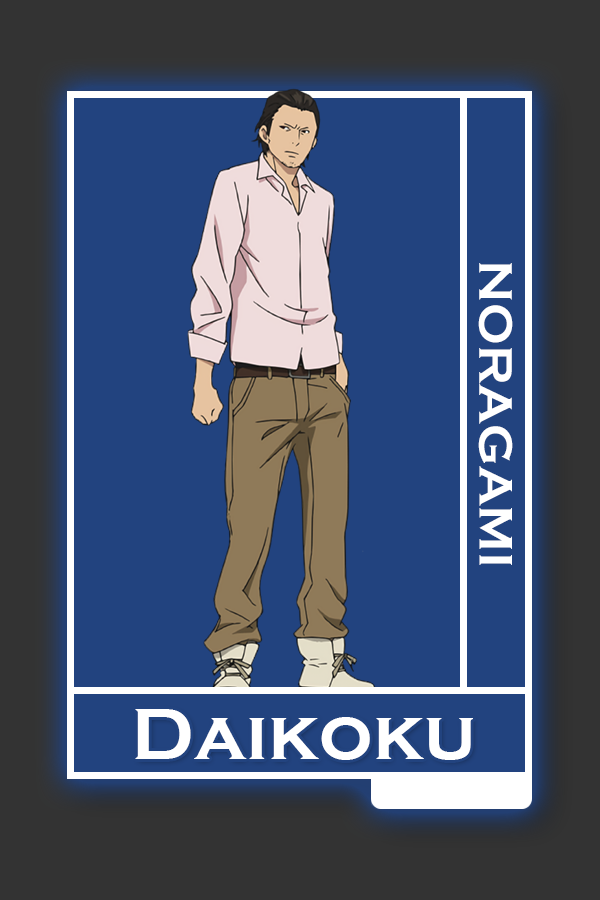
<style>
.page{position:relative;width:600px;height:900px;background:#22437f}
.page>*{position:absolute;margin:0}
.t1{font:48.8px "CopperplateGothic-Bold";color:#ffffff}
.t2{font:75px "CopperplateGothic-Bold";color:#ffffff}
</style>
<div class="page">
<p class="t1" style="left:478px;top:263px;width:35px;height:302px;rotate:90deg">NORAGAMI</p>
<p class="t2" style="left:135px;top:709px;width:338px;height:51px">Daikoku</p>
</div>
